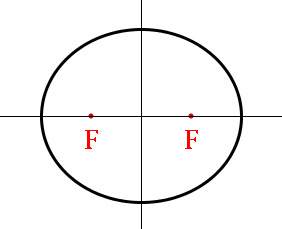
<style>
.page{position:relative;width:282px;height:229px;background:#ffffff}
.page>*{position:absolute;margin:0}
.t1{font:48px "CambriaMath";color:#ff0000}
</style>
<div class="page">
<p class="t1" style="left:85px;top:130px;width:13px;height:19px">F</p>
<p class="t1" style="left:185px;top:130px;width:13px;height:19px">F</p>
</div>
